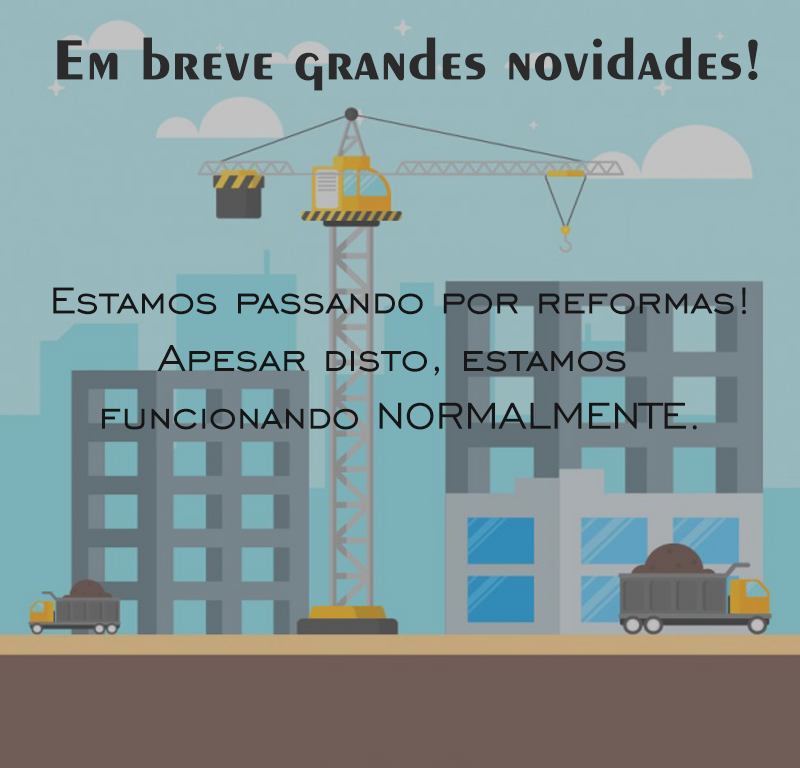
<style>
.page{position:relative;width:800px;height:768px}
.page>*{position:absolute;margin:0}
.t1{font:60px "Exotic350BT-Bold";color:#2b2b2b}
.t2{font:48px "EngraversGothicBT-Regular";color:#171616}
</style>
<div class="page">
<p class="t1" style="left:57px;top:37px;width:701px;height:54px">Em breve grandes novidades!</p>
<p class="t2" style="left:53px;top:287px;width:693px;height:143px;text-align:center">Estamos passando por reformas!<br>Apesar disto, estamos <br>funcionando NORMALMENTE.</p>
</div>
